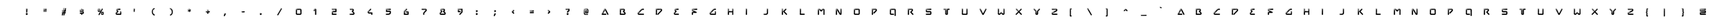
<style>
.page{position:relative;width:1724px;height:22px;background:#ffffff}
.page>*{position:absolute;margin:0}
.t1{font:9px "Chilopod-Regular";color:#000000}
</style>
<div class="page">
<p class="t1" style="left:26px;top:6px;width:1680px;height:10px">! " # $ % &amp; ' ( ) * + , - . / 0 1 2 3 4 5 6 7 8 9 : ; &lt; = &gt; ? @ A B C D E F G H I J K L M N O P Q R S T U V W X Y Z [ \ ] ^ _ ` a b c d e f g h i j k l m n o p q r s t u v w x y z { | } ~</p>
</div>
